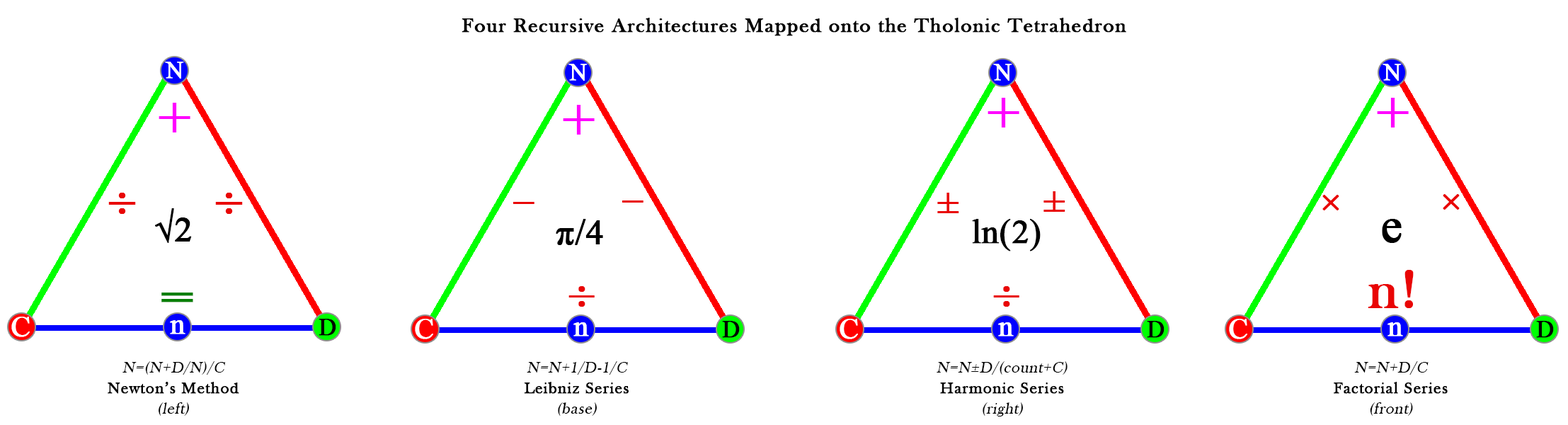
<style>
.page{position:relative;width:1568px;height:425px;background:#ffffff}
.page>*{position:absolute;margin:0}
.t1{font:20.6px "BaskOldFace";letter-spacing:0.04em;color:#000000;font-weight:bold}
.t2{font:24px "TimesNewRomanPSMT";color:#ffffff;font-weight:bold}
.t3{font:56.4px "TimesNewRomanPSMT";color:#ff00ff;font-weight:bold}
.t4{font:58.5px "BaskOldFace";letter-spacing:0.04em;color:#e90505;font-weight:bold}
.t5{font:38.3px "TimesNewRomanPSMT";letter-spacing:0.04em;color:#e90505;font-weight:bold}
.t6{font:35.4px "TimesNewRomanPSMT";color:#000000;font-weight:bold}
.t7{font:33.9px "TimesNewRomanPSMT";color:#000000;font-weight:bold}
.t8{font:47.2px "TimesNewRomanPSMT";color:#000000;font-weight:bold}
.t9{font:56.9px "BaskOldFace";letter-spacing:0.04em;color:#e90505;font-weight:bold}
.t10{font:69.2px "BaskOldFace";letter-spacing:0.04em;color:#087f05;font-weight:bold}
.t11{font:29.2px "TimesNewRomanPSMT";color:#ffffff;font-weight:bold}
.t12{font:24.2px "TimesNewRomanPSMT";color:#000000;font-weight:bold}
.t13{font:16.2px/20.6px "BaskOldFace";letter-spacing:0.04em;color:#000000;font-weight:bold}
.t14{font:16.2px/20.6px "BaskOldFace";letter-spacing:0.04em;color:#000000;font-style:italic}
</style>
<div class="page">
<p class="t1" style="left:462px;top:18px;width:664px;height:18px">Four Recursive Architectures Mapped onto the Tholonic Tetrahedron</p>
<p class="t2" style="left:165px;top:62px;width:19px;height:17px">N</p>
<p class="t2" style="left:568px;top:64px;width:20px;height:17px">N</p>
<p class="t2" style="left:993px;top:64px;width:19px;height:17px">N</p>
<p class="t2" style="left:1383px;top:64px;width:19px;height:17px">N</p>
<p class="t3" style="left:988px;top:98px;width:31px;height:29px">+</p>
<p class="t3" style="left:1377px;top:98px;width:32px;height:29px">+</p>
<p class="t3" style="left:159px;top:103px;width:31px;height:29px">+</p>
<p class="t3" style="left:563px;top:105px;width:32px;height:30px">+</p>
<p class="t4" style="left:108px;top:193px;width:28px;height:21px">÷</p>
<p class="t4" style="left:215px;top:193px;width:28px;height:21px">÷</p>
<p class="t5" style="left:937px;top:193px;width:22px;height:20px">±</p>
<p class="t5" style="left:1043px;top:191px;width:22px;height:21px">±</p>
<p class="t5" style="left:1322px;top:195px;width:17px;height:15px">×</p>
<p class="t5" style="left:1443px;top:194px;width:17px;height:16px">×</p>
<p class="t6" style="left:155px;top:208px;width:37px;height:35px">√2</p>
<p class="t5" style="left:513px;top:202px;width:21px;height:2px">−</p>
<p class="t5" style="left:622px;top:200px;width:21px;height:2px">−</p>
<p class="t6" style="left:556px;top:219px;width:47px;height:26px">π/4</p>
<p class="t7" style="left:972px;top:219px;width:69px;height:32px">ln(2)</p>
<p class="t8" style="left:1382px;top:219px;width:20px;height:24px">e</p>
<p class="t9" style="left:1368px;top:270px;width:46px;height:38px">n!</p>
<p class="t10" style="left:161px;top:292px;width:32px;height:10px">=</p>
<p class="t9" style="left:568px;top:286px;width:27px;height:21px">÷</p>
<p class="t9" style="left:993px;top:286px;width:26px;height:21px">÷</p>
<p class="t11" style="left:11px;top:316px;width:19px;height:21px">C</p>
<p class="t11" style="left:170px;top:320px;width:15px;height:14px">n</p>
<p class="t12" style="left:319px;top:319px;width:17px;height:17px">D</p>
<p class="t11" style="left:415px;top:319px;width:18px;height:20px">C</p>
<p class="t11" style="left:573px;top:322px;width:16px;height:14px">n</p>
<p class="t12" style="left:722px;top:321px;width:18px;height:17px">D</p>
<p class="t11" style="left:840px;top:319px;width:18px;height:20px">C</p>
<p class="t11" style="left:998px;top:322px;width:16px;height:14px">n</p>
<p class="t12" style="left:1147px;top:321px;width:17px;height:17px">D</p>
<p class="t11" style="left:1229px;top:319px;width:18px;height:20px">C</p>
<p class="t11" style="left:1387px;top:322px;width:16px;height:14px">n</p>
<p class="t12" style="left:1536px;top:321px;width:18px;height:17px">D</p>
<p class="t13" style="left:108px;top:361px;width:131px;height:55px;text-align:center"><span class="t14">N=(N+D/N)/C<br></span>Newton’s Method<br><span class="t14">(left)</span></p>
<p class="t13" style="left:524px;top:361px;width:105px;height:55px;text-align:center"><span class="t14">N=N+1/D-1/C<br></span>Leibniz Series<br><span class="t14">(base)</span></p>
<p class="t14" style="left:937px;top:361px;width:131px;height:55px;text-align:center">N=N±D/(count+C)<br><span class="t13">Harmonic Series<br></span>(right)</p>
<p class="t13" style="left:1334px;top:361px;width:114px;height:55px;text-align:center"><span class="t14">N=N+D/C<br></span>Factorial Series<br><span class="t14">(front)</span></p>
</div>
